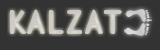
<style>
.page{position:relative;width:160px;height:50px;background:#333333}
.page>*{position:absolute;margin:0}
.t1{font:30px "LetterGothicStd-Bold";color:#d0cbc8;scale:1.07 1}
</style>
<div class="page">
<p class="t1" style="left:11px;top:10px;width:110px;height:23px">KALZAT</p>
</div>
